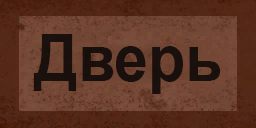
<style>
.page{position:relative;width:256px;height:128px}
.page>*{position:absolute;margin:0}
.t1{font:65.3px "Arial-BoldMT";color:#070707;scale:0.93 1}
</style>
<div class="page">
<p class="t1" style="left:33px;top:34px;width:188px;height:60px;opacity:0.9">Дверь</p>
</div>
